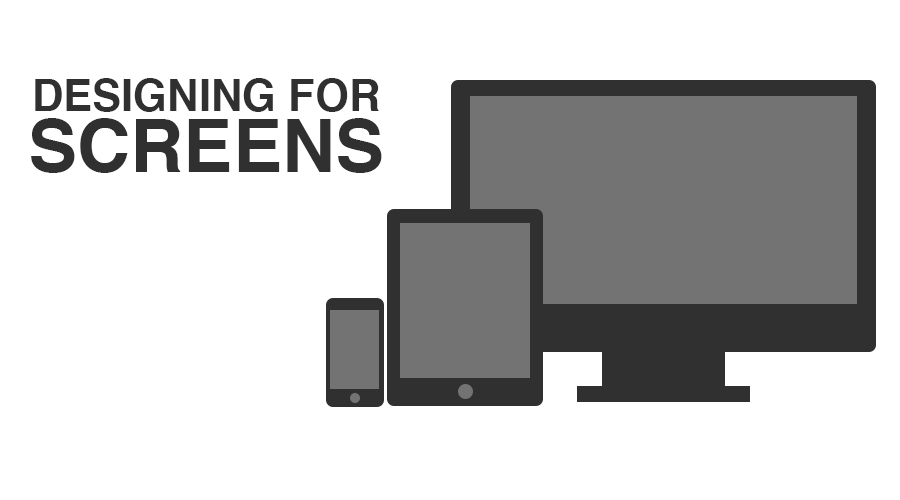
<style>
.page{position:relative;width:900px;height:500px;background:#ffffff}
.page>*{position:absolute;margin:0}
.t1{font:43.5px/60.2px "Helvetica-Bold";color:#303030}
.t2{font:73.6px/60.2px "Helvetica-Bold";color:#303030}
</style>
<div class="page">
<p class="t1" style="left:31px;top:78px;width:351px;height:95px;text-align:center">DESIGNING FOR<br><span class="t2">SCREENS</span></p>
</div>
